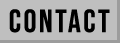
<style>
.page{position:relative;width:120px;height:43px;background:#bfbfbf}
.page>*{position:absolute;margin:0}
.t1{font:32px "BebasNeue-Regular";letter-spacing:0.08em;color:#000000}
</style>
<div class="page">
<p class="t1" style="left:9px;top:9px;width:101px;height:24px">CONTACT</p>
</div>
